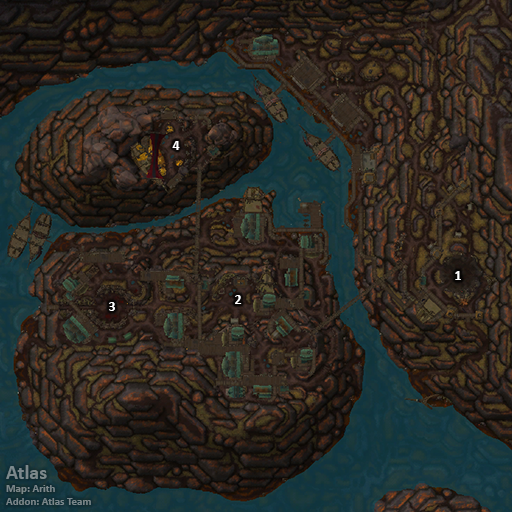
<style>
.page{position:relative;width:512px;height:512px}
.page>*{position:absolute;margin:0}
.t1{font:14px "Calibri-Bold";color:#ffffff}
.t2{font:11px "Calibri-Bold";color:#7b878a}
.t3{font:20px "Calibri-Bold";color:#7b878a}
</style>
<div class="page">
<p class="t1" style="left:172px;top:141px;width:8px;height:9px">4</p>
<p class="t1" style="left:455px;top:271px;width:6px;height:9px">1</p>
<p class="t1" style="left:109px;top:302px;width:6px;height:9px">3</p>
<p class="t1" style="left:235px;top:295px;width:7px;height:9px">2</p>
<p class="t2" style="left:6px;top:465px;width:85px;height:40px"><span class="t3">Atlas<br></span>Map: Arith<br>Addon: Atlas Team</p>
</div>
